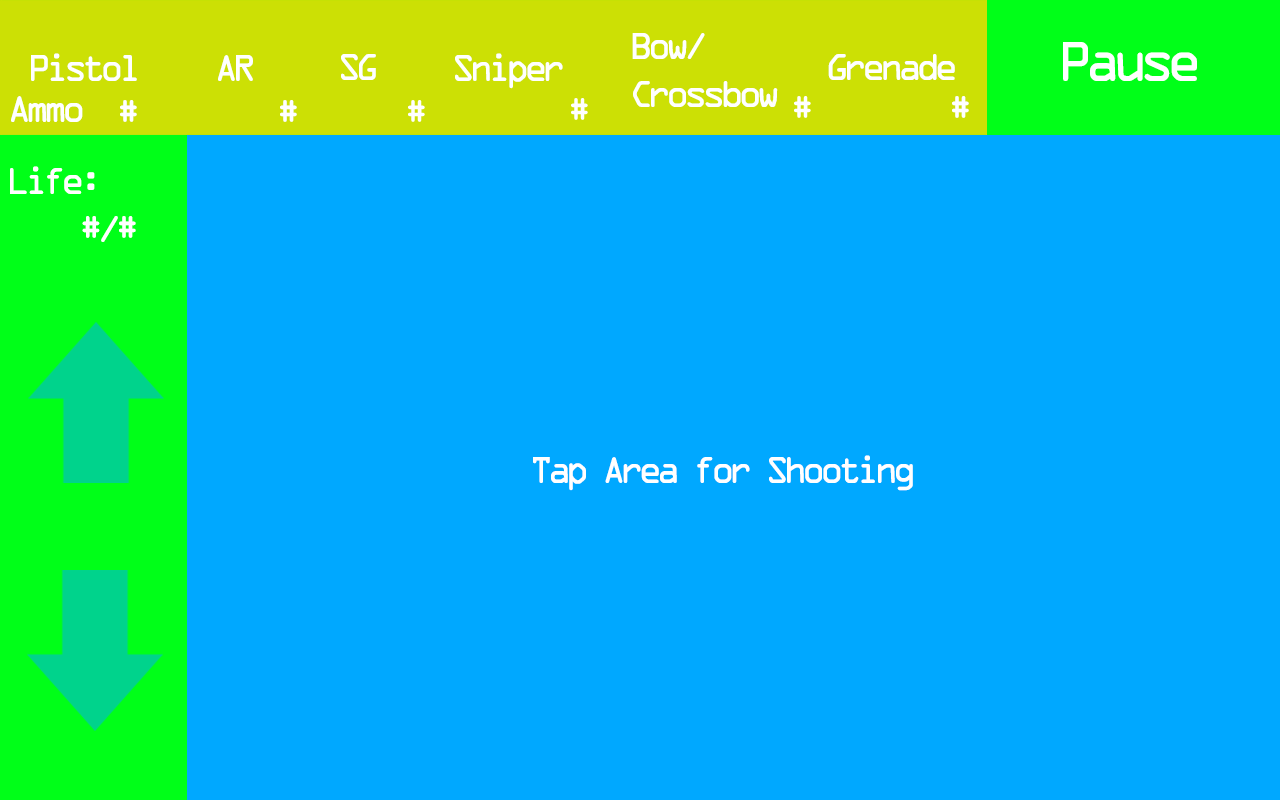
<style>
.page{position:relative;width:1280px;height:800px;background:#00a8ff}
.page>*{position:absolute;margin:0}
.t1{font:40px "OCRAExtended";letter-spacing:-0.15em;color:#ffffff}
.t2{font:60px "OCRAExtended";letter-spacing:-0.15em;color:#ffffff}
</style>
<div class="page">
<p class="t1" style="left:632px;top:33px;width:146px;height:74px">Bow/<br>Crossbow</p>
<p class="t1" style="left:31px;top:53px;width:106px;height:28px">Pistol</p>
<p class="t1" style="left:341px;top:54px;width:35px;height:26px">SG</p>
<p class="t1" style="left:455px;top:53px;width:108px;height:36px">Sniper</p>
<p class="t1" style="left:828px;top:54px;width:127px;height:26px">Grenade</p>
<p class="t2" style="left:1063px;top:42px;width:134px;height:39px">Pause</p>
<p class="t1" style="left:218px;top:55px;width:35px;height:26px">AR</p>
<p class="t1" style="left:11px;top:96px;width:72px;height:26px">Ammo</p>
<p class="t1" style="left:120px;top:100px;width:17px;height:22px">#</p>
<p class="t1" style="left:280px;top:100px;width:17px;height:22px">#</p>
<p class="t1" style="left:952px;top:96px;width:17px;height:22px">#</p>
<p class="t1" style="left:10px;top:166px;width:126px;height:76px">Life:<br>    #/#</p>
<p class="t1" style="left:533px;top:455px;width:380px;height:36px">Tap Area for Shooting</p>
</div>
